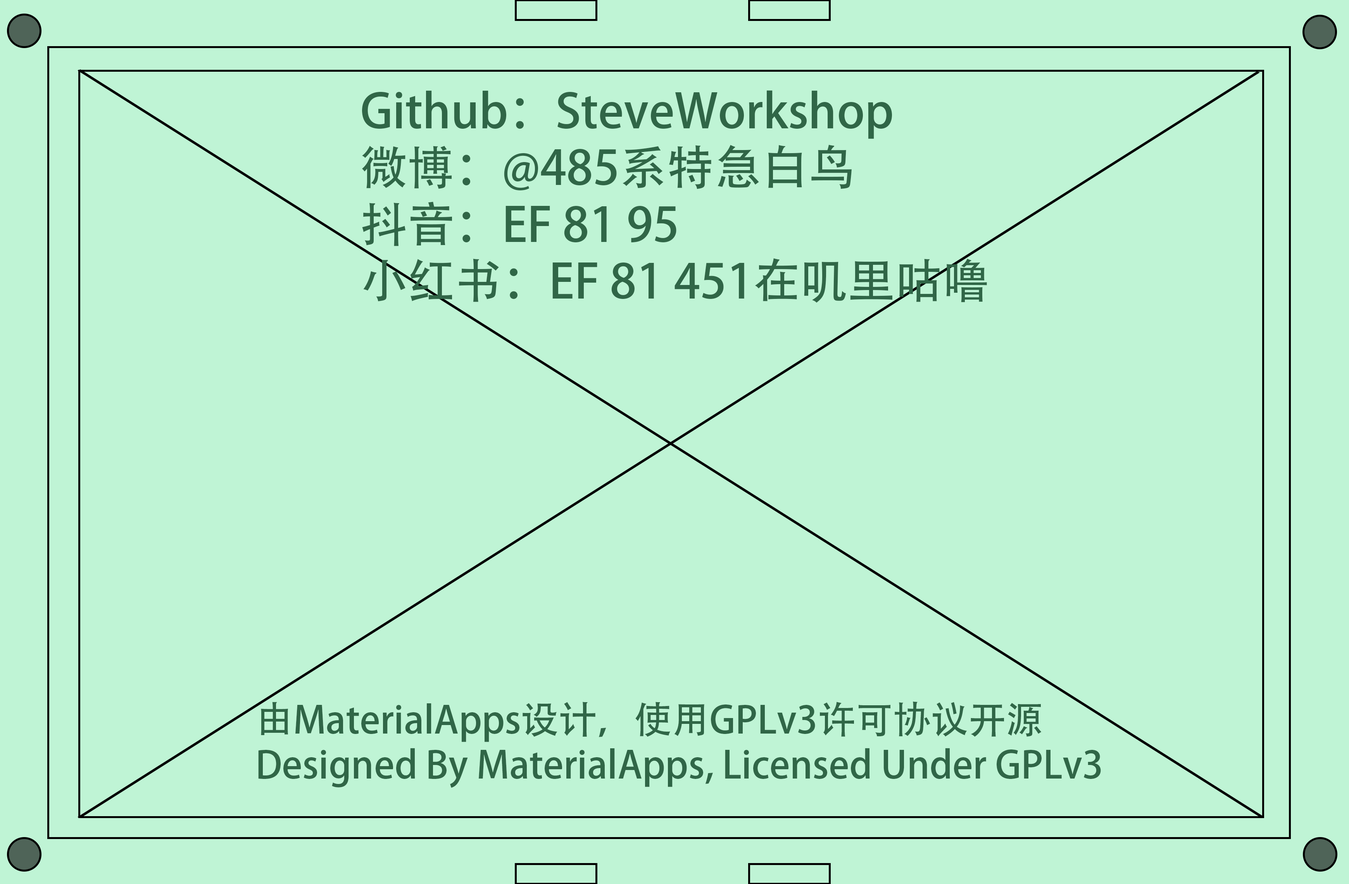
<style>
.page{position:relative;width:1349px;height:884px;background:#bff4d5}
.page>*{position:absolute;margin:0}
.t1{font:47.2px "AdobeHeitiStd-Regular";color:#306647}
.t2{font:37.7px "AdobeHeitiStd-Regular";color:#306647}
</style>
<div class="page">
<p class="t1" style="left:362px;top:90px;width:625px;height:213px">Github：SteveWorkshop<br>微博：@485系特急白鸟<br>抖音：EF 81 95<br>小红书：EF 81 451在叽里咕噜</p>
<p class="t2" style="left:258px;top:701px;width:843px;height:87px">由MaterialApps设计，使用GPLv3许可协议开源<br>Designed By MaterialApps, Licensed Under GPLv3</p>
</div>
